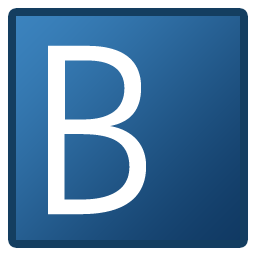
<style>
.page{position:relative;width:256px;height:256px;background:#ffffff}
.page>*{position:absolute;margin:0}
.t1{font:240px "FrutigerLTStd-Light";color:#ffffff}
</style>
<div class="page">
<p class="t1" style="left:48px;top:45px;width:98px;height:170px">B</p>
</div>
